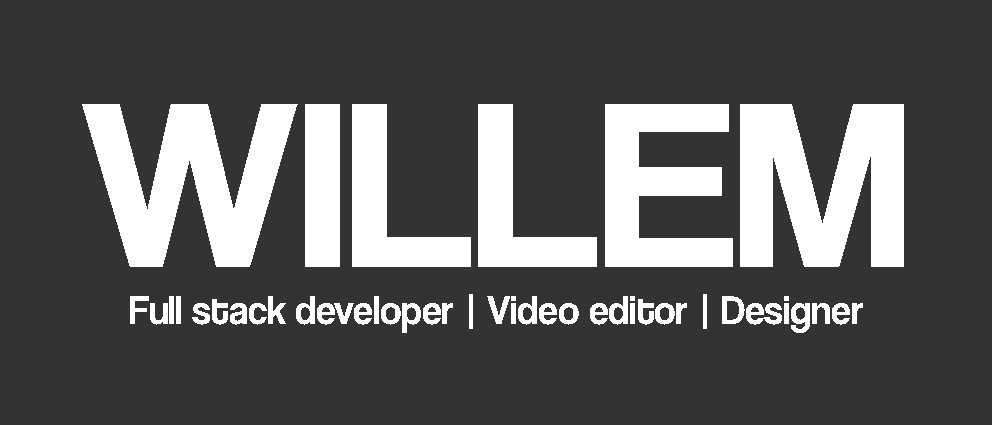
<style>
.page{position:relative;width:992px;height:425px;background:#333333}
.page>*{position:absolute;margin:0}
.t1{font:245.5px "CoolveticaRg-Regular";color:#ffffff;scale:1.04 1}
.t2{font:40.6px "CoolveticaRg-Regular";color:#ffffff}
</style>
<div class="page">
<p class="t1" style="left:82px;top:104px;width:822px;height:163px">WILLEM</p>
<p class="t2" style="left:130px;top:294px;width:733px;height:39px">Full stack developer | Video editor | Designer</p>
</div>
